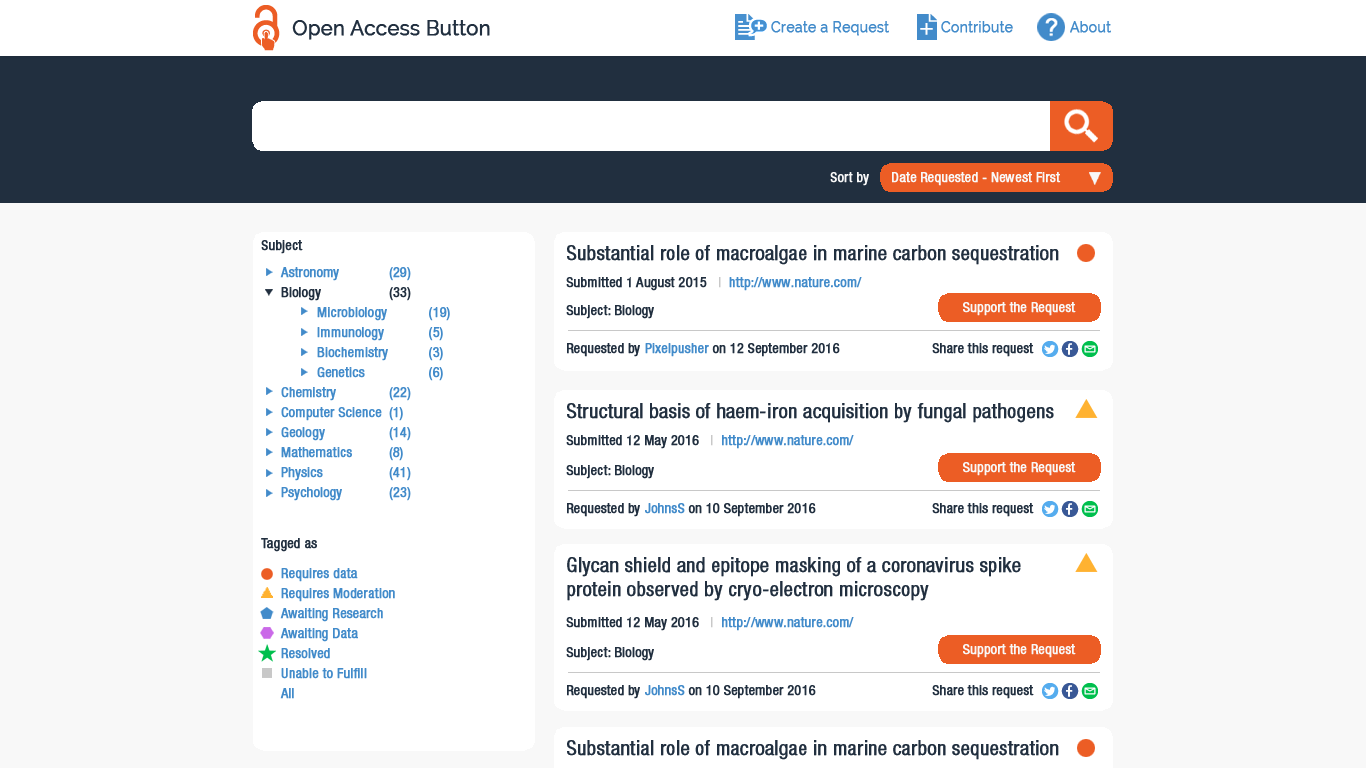
<style>
.page{position:relative;width:1366px;height:768px;background:#ffffff}
.page>*{position:absolute;margin:0}
.t1{font:20px "Raleway";color:#212f3f;font-weight:bold}
.t2{font:14px "Raleway";color:#428bca;font-weight:bold}
.t3{font:14px "HelveticaNeueLTPro-Cn";color:#f8f8f8;font-weight:bold}
.t4{font:14px "HelveticaNeueLTPro-Cn";color:#212f3f;font-weight:bold}
.t5{font:20px "HelveticaNeueLTPro-Cn";color:#212f3f;font-weight:bold}
.t6{font:14px/20px "HelveticaNeueLTPro-Cn";color:#428bca;font-weight:bold}
.t7{font:14px/20px "HelveticaNeueLTPro-Cn";color:#212f3f;font-weight:bold}
.t8{font:14px "HelveticaNeueLTPro-Cn";color:#c8c8c8;font-weight:bold}
.t9{font:14px "HelveticaNeueLTPro-Cn";color:#428bca;font-weight:bold}
</style>
<div class="page">
<p class="t1" style="left:292px;top:20px;width:198px;height:20px">Open Access Button</p>
<p class="t2" style="left:771px;top:21px;width:118px;height:15px">Create a Request</p>
<p class="t2" style="left:941px;top:21px;width:72px;height:12px">Contribute</p>
<p class="t2" style="left:1070px;top:21px;width:41px;height:12px">About</p>
<p class="t3" style="left:830px;top:172px;width:39px;height:14px">Sort by</p>
<p class="t3" style="left:892px;top:172px;width:169px;height:14px">Date Requested - Newest First</p>
<p class="t4" style="left:261px;top:240px;width:42px;height:14px">Subject</p>
<p class="t5" style="left:567px;top:245px;width:492px;height:20px">Substantial role of macroalgae in marine carbon sequestration</p>
<p class="t6" style="left:280px;top:267px;width:170px;height:234px">Astronomy  (29)<br><span class="t7">Biology  (33)<br></span> Microbiology      (19)<br> Immunology      (5)<br> Biochemistry      (3)<br> Genetics      (6)<br>Chemistry  (22)<br>Computer Science (1)<br>Geology  (14)<br>Mathematics  (8)<br>Physics  (41)<br>Psychology  (23)</p>
<p class="t4" style="left:566px;top:277px;width:296px;height:14px">Submitted 1 August 2015   <span class="t8">|  </span><span class="t9">http://www.nature.com/</span></p>
<p class="t4" style="left:566px;top:305px;width:88px;height:14px">Subject: Biology</p>
<p class="t3" style="left:963px;top:302px;width:113px;height:14px">Support the Request</p>
<p class="t4" style="left:567px;top:343px;width:273px;height:14px">Requested by <span class="t9">Pixelpusher</span> on 12 September 2016</p>
<p class="t4" style="left:932px;top:343px;width:102px;height:14px">Share this request</p>
<p class="t5" style="left:567px;top:403px;width:487px;height:20px">Structural basis of haem-iron acquisition by fungal pathogens</p>
<p class="t9" style="left:566px;top:435px;width:288px;height:14px"><span class="t4">Submitted 12 May 2016   </span><span class="t8">|  </span>http://www.nature.com/</p>
<p class="t3" style="left:963px;top:462px;width:113px;height:14px">Support the Request</p>
<p class="t4" style="left:566px;top:465px;width:88px;height:14px">Subject: Biology</p>
<p class="t4" style="left:567px;top:503px;width:249px;height:14px">Requested by <span class="t9">JohnsS</span> on 10 September 2016</p>
<p class="t4" style="left:932px;top:503px;width:102px;height:14px">Share this request</p>
<p class="t4" style="left:261px;top:538px;width:56px;height:14px">Tagged as</p>
<p class="t5" style="left:567px;top:557px;width:454px;height:44px">Glycan shield and epitope masking of a coronavirus spike protein observed by cryo-electron microscopy</p>
<p class="t6" style="left:280px;top:568px;width:115px;height:131px">Requires data<br>Requires Moderation<br>Awaiting Research<br>Awaiting Data<br>Resolved <br>Unable to Fulfill<br>All</p>
<p class="t9" style="left:566px;top:617px;width:288px;height:14px"><span class="t4">Submitted 12 May 2016   </span><span class="t8">|  </span>http://www.nature.com/</p>
<p class="t4" style="left:566px;top:647px;width:88px;height:14px">Subject: Biology</p>
<p class="t3" style="left:963px;top:644px;width:113px;height:14px">Support the Request</p>
<p class="t4" style="left:567px;top:685px;width:249px;height:14px">Requested by <span class="t9">JohnsS</span> on 10 September 2016</p>
<p class="t4" style="left:932px;top:685px;width:102px;height:14px">Share this request</p>
<p class="t5" style="left:567px;top:740px;width:492px;height:20px">Substantial role of macroalgae in marine carbon sequestration</p>
</div>
